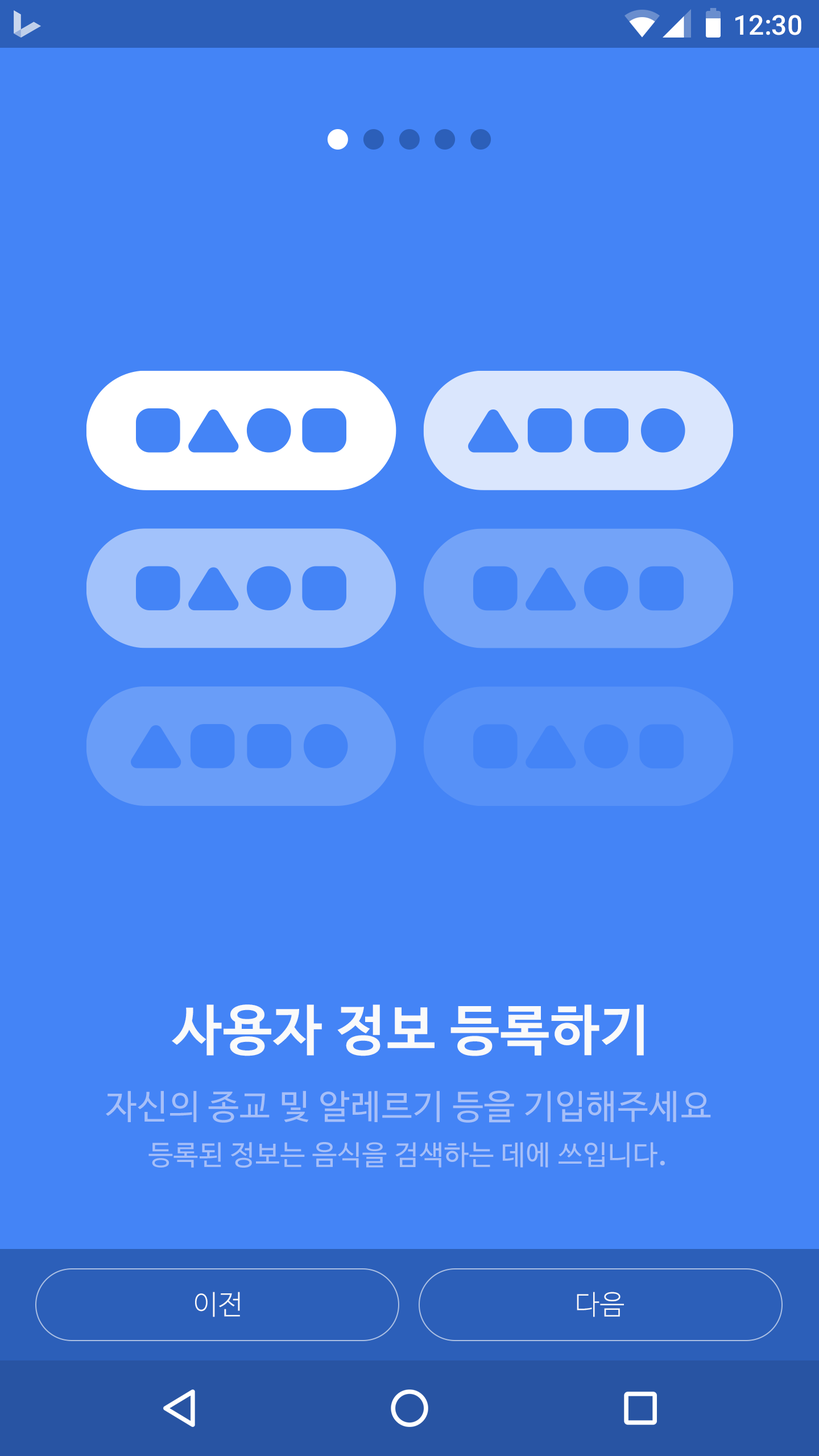
<style>
.page{position:relative;width:819px;height:1456px;background:#4484f6}
.page>*{position:absolute;margin:0}
.t1{font:27.3px "Roboto-Medium";color:#ffffff}
.t2{font:54.6px "NanumBarunGothicBold";letter-spacing:0.025em;color:#fafafa}
.t3{font:27.3px/46.1px "NanumBarunGothic";letter-spacing:0.025em;color:#a6bff8}
.t4{font:34.1px/46.1px "NanumBarunGothic";letter-spacing:0.025em;color:#a6bff8}
.t5{font:27.3px "NanumBarunGothicLight";letter-spacing:0.025em;color:#fafafa}
</style>
<div class="page">
<p class="t1" style="left:735px;top:15px;width:66px;height:20px">12:30</p>
<p class="t2" style="left:172px;top:1004px;width:472px;height:52px">사용자 정보 등록하기</p>
<p class="t3" style="left:106px;top:1090px;width:605px;height:78px;text-align:center"><span class="t4">자신의 종교 및 알레르기 등을 기입해주세요<br></span>등록된 정보는 음식을 검색하는 데에 쓰입니다<span class="t4">.</span></p>
<p class="t5" style="left:195px;top:1292px;width:45px;height:25px">이전</p>
<p class="t5" style="left:577px;top:1292px;width:47px;height:25px">다음</p>
</div>
